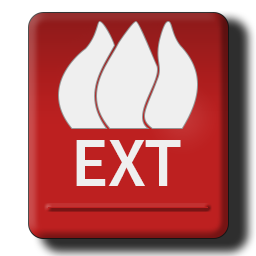
<style>
.page{position:relative;width:256px;height:256px;background:#bd2020}
.page>*{position:absolute;margin:0}
.t1{font:70px "SourceSansPro-SemiBold";letter-spacing:-0.01em;color:#efefef}
</style>
<div class="page">
<p class="t1" style="left:76px;top:140px;width:105px;height:46px">EXT</p>
</div>
